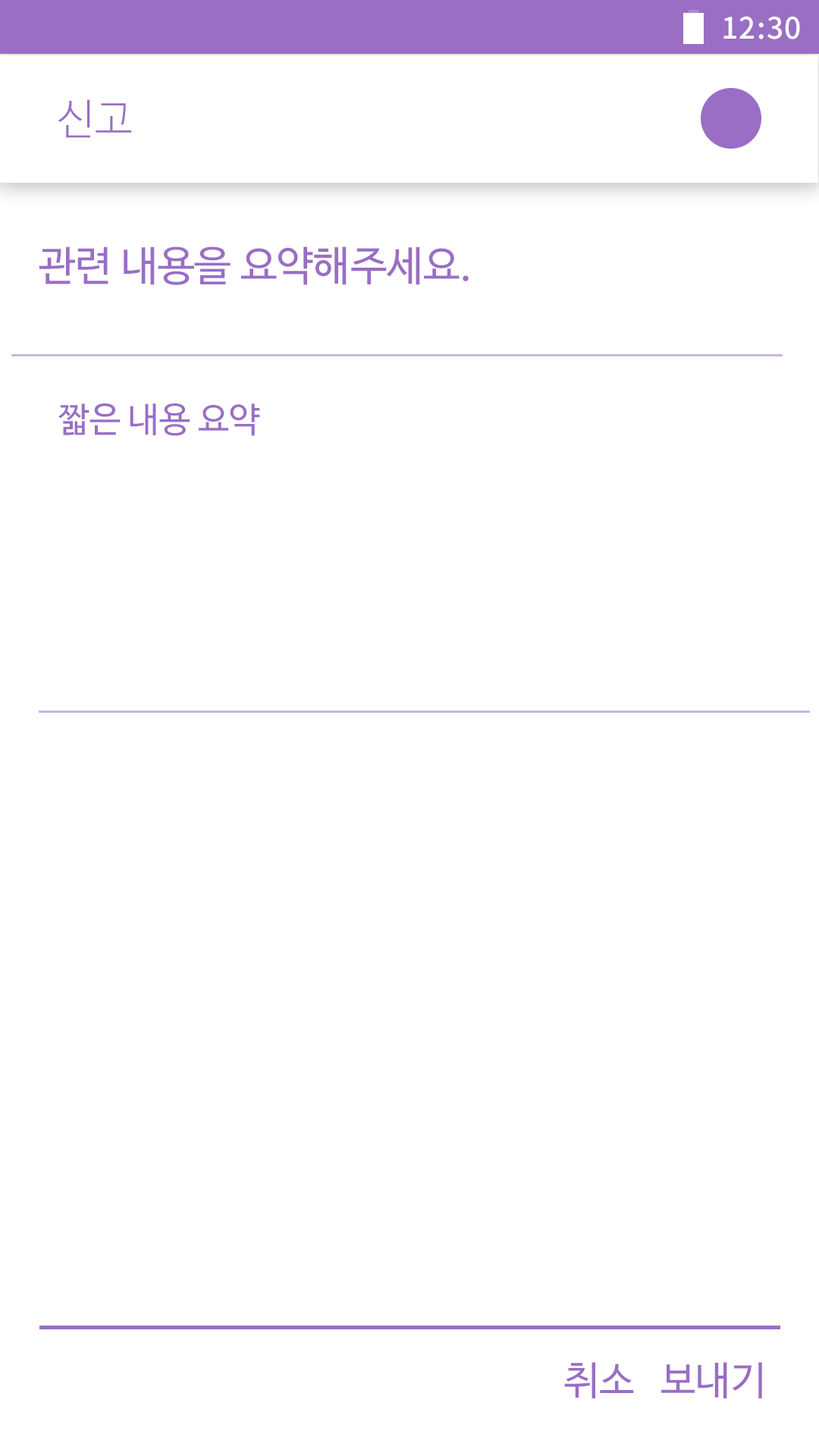
<style>
.page{position:relative;width:819px;height:1456px;background:#ffffff}
.page>*{position:absolute;margin:0}
.t1{font:29.6px "NotoSansCJKkr-Medium";letter-spacing:0.029em;color:#ffffff}
.t2{font:42.3px "NanumBarunGothicLight";color:#996ec4}
.t3{font:41.1px "NanumBarunGothic";color:#996ec4}
.t4{font:34.8px "NanumBarunGothic";color:#996ec4}
.t5{font:39.4px "NanumBarunGothic";color:#996ec4}
</style>
<div class="page">
<p class="t1" style="left:723px;top:16px;width:77px;height:23px">12:30</p>
<p class="t2" style="left:58px;top:99px;width:74px;height:39px">신고</p>
<p class="t3" style="left:39px;top:246px;width:430px;height:39px">관련 내용을 요약해주세요.</p>
<p class="t4" style="left:58px;top:403px;width:202px;height:33px">짧은 내용 요약</p>
<p class="t5" style="left:564px;top:1362px;width:198px;height:36px">취소   보내기</p>
</div>
